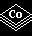
<style>
.page{position:relative;width:32px;height:36px;background:#000000}
.page>*{position:absolute;margin:0}
.t1{font:12px "CourierNewPS-BoldMT";color:#ffffff}
</style>
<div class="page">
<p class="t1" style="left:9px;top:10px;width:13px;height:8px">Co</p>
</div>
